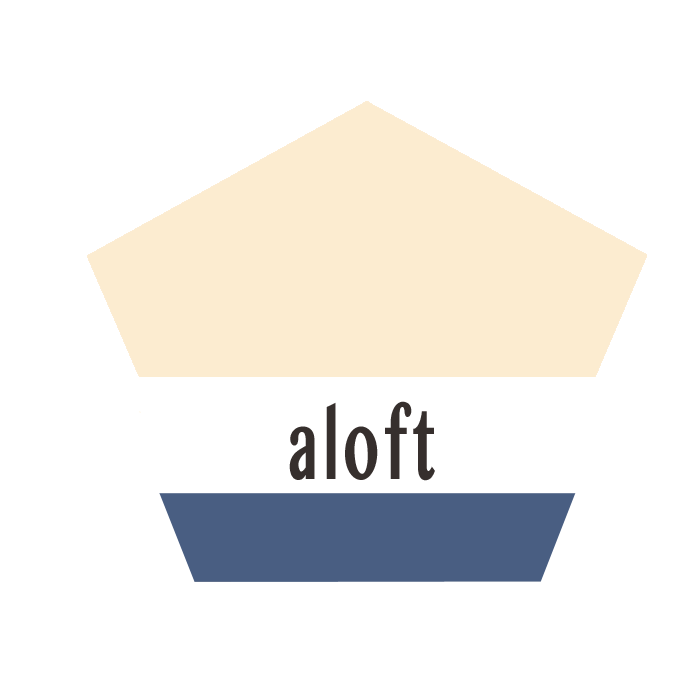
<style>
.page{position:relative;width:700px;height:700px;background:#ffffff}
.page>*{position:absolute;margin:0}
.t1{font:97.9px "LaoMN-Bold";letter-spacing:0.075em;color:#362f2d;scale:0.57 1}
</style>
<div class="page">
<p class="t1" style="left:289px;top:401px;width:146px;height:80px">aloft</p>
</div>
